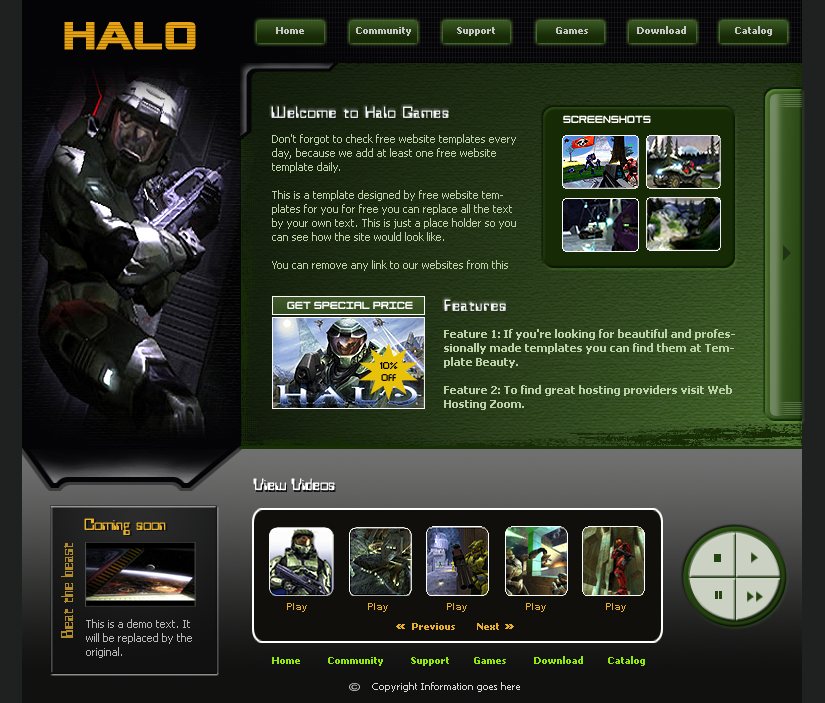
<style>
.page{position:relative;width:825px;height:703px}
.page>*{position:absolute;margin:0}
.t1{font:38.4px "AlienEncounters";color:#e7a312;font-weight:bold;scale:1.25 1}
.t2{font:10px "Tahoma-Bold";color:#c7c6c6}
.t3{font:18px "Westminster";letter-spacing:0.05em;color:#f3f3f9}
.t4{font:10px "Tycho";color:#ffffff}
.t5{font:11px/14px "Tahoma";color:#bbd2a8}
.t6{font:11px/14px "Tahoma-Bold";color:#bbd2a8}
.t7{font:8px/12px "Standard0753";color:#030305}
.t8{font:18px "Westminster";color:#ffffff}
.t9{font:18px "Westminster";color:#e7b12d}
.t10{font:18px "Westminster";color:#101110}
.t11{font:18px "Westminster";color:#b18a29}
.t12{font:10px "Arial-BoldMT";color:#e7b12d}
.t13{font:11px/14px "Tahoma";color:#b8b7b7}
.t14{font:10px "Tahoma-Bold";color:#e7b12d}
.t15{font:10px "Tahoma-Bold";color:#92e80b}
.t16{font:10px "Tahoma";color:#d7d8d7}
</style>
<div class="page">
<p class="t1" style="left:64px;top:22px;width:132px;height:28px">Halo</p>
<p class="t2" style="left:276px;top:26px;width:496px;height:10px">Home                 Community               Support                    Games                Download                Catalog</p>
<p class="t3" style="left:271px;top:106px;width:178px;height:12px">Welcome to Halo Games</p>
<p class="t4" style="left:563px;top:115px;width:88px;height:8px">Screenshots</p>
<p class="t5" style="left:272px;top:134px;width:244px;height:137px">Don't forgot to check free website templates every day, because we add at least one free website template daily.<br><br>This is a template designed by free website templates for you for free you can replace all the text by your own text. This is just a place holder so you can see how the site would look like.<br><br>You can remove any link to our websites from this template you're free to use the template without linking back to us.<br>Don't want your boss to know you used a free website template ;) .</p>
<p class="t4" style="left:287px;top:301px;width:126px;height:8px">GEt Special Price</p>
<p class="t3" style="left:444px;top:299px;width:62px;height:12px">Features</p>
<p class="t6" style="left:444px;top:329px;width:291px;height:81px">Feature 1: If you're looking for beautiful and professionally made templates you can find them at Template Beauty.<br><br>Feature 2: To find great hosting providers visit Web Hosting Zoom.</p>
<p class="t7" style="left:380px;top:362px;width:18px;height:19px;text-align:center">10%<br>Off</p>
<p class="t8" style="left:253px;top:478px;width:82px;height:12px">View Videos</p>
<p class="t9" style="left:84px;top:518px;width:82px;height:17px">Coming soon</p>
<p class="t10" style="left:86px;top:519px;width:82px;height:17px">Coming soon</p>
<p class="t11" style="left:61px;top:543px;width:12px;height:95px;rotate:-90deg">Beat the beast</p>
<p class="t12" style="left:287px;top:603px;width:20px;height:9px">Play</p>
<p class="t12" style="left:368px;top:603px;width:20px;height:9px">Play</p>
<p class="t12" style="left:447px;top:603px;width:20px;height:9px">Play</p>
<p class="t12" style="left:526px;top:603px;width:20px;height:9px">Play</p>
<p class="t12" style="left:606px;top:603px;width:20px;height:9px">Play</p>
<p class="t13" style="left:86px;top:619px;width:106px;height:39px">This is a demo text. It will be replaced by the original.</p>
<p class="t14" style="left:412px;top:623px;width:87px;height:7px">Previous       Next</p>
<p class="t15" style="left:272px;top:656px;width:373px;height:10px">Home         Community         Support        Games         Download        Catalog</p>
<p class="t16" style="left:372px;top:682px;width:148px;height:10px">Copyright Information goes here</p>
</div>
